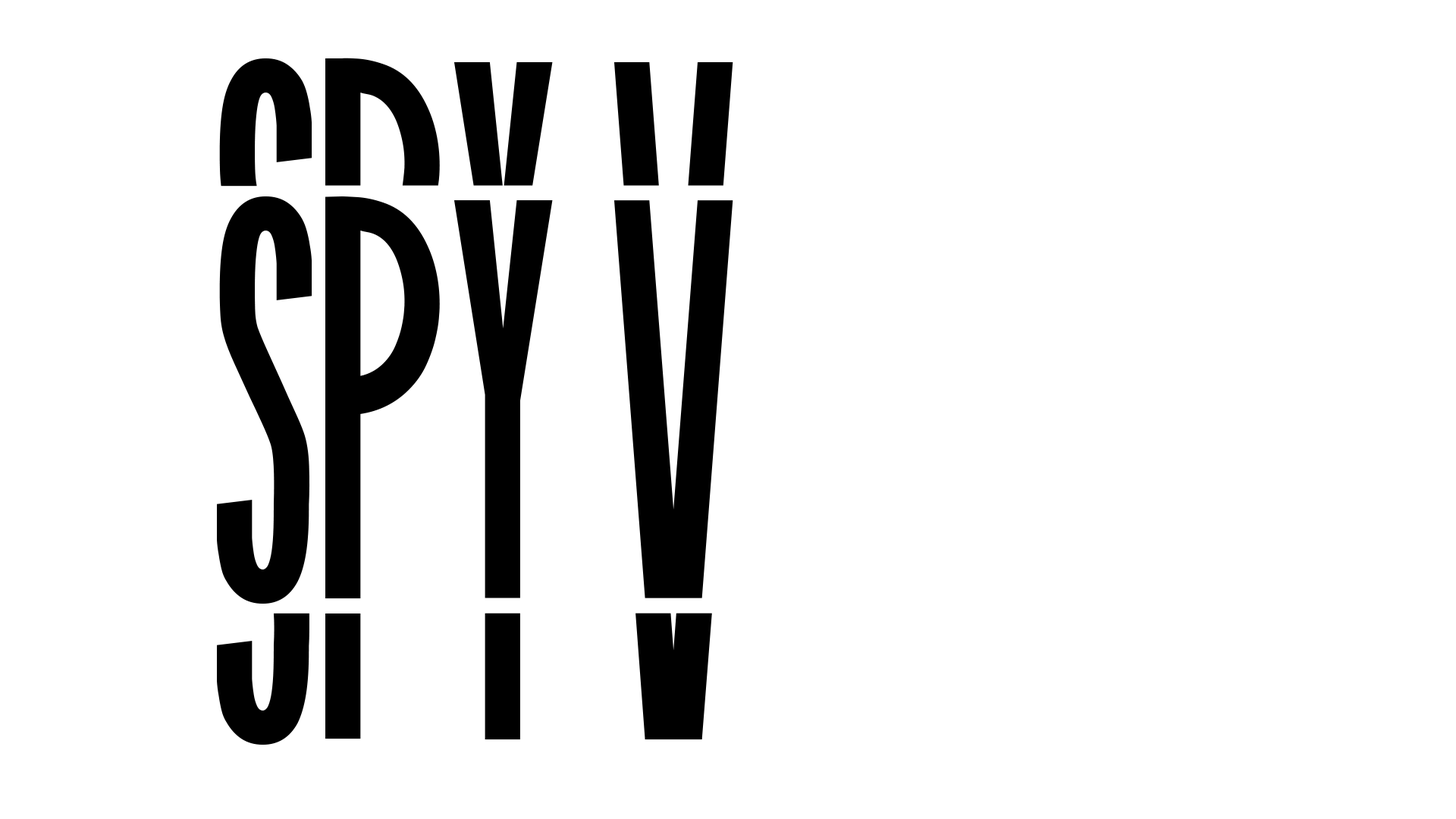
<style>
.page{position:relative;width:1456px;height:819px;background:#ffffff}
.page>*{position:absolute;margin:0}
.t1{font:474px "BLASTIMOSANS";color:#000000}
.t2{font:474px "BLASTIMOSANS";color:#ffffff}
</style>
<div class="page">
<p class="t1" style="left:217px;top:58px;width:1023px;height:687px">Spy v<span class="t2">s Spy</span></p>
</div>
